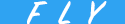
<style>
.page{position:relative;width:125px;height:24px;background:#2fa3f2}
.page>*{position:absolute;margin:0}
.t1{font:37px "SignPainter-HouseScriptSemibold";color:#ffffff}
</style>
<div class="page">
<p class="t1" style="left:27px;top:1px;width:21px;height:24px">F</p>
<p class="t1" style="left:58px;top:1px;width:13px;height:24px">L</p>
<p class="t1" style="left:88px;top:1px;width:19px;height:24px">Y</p>
</div>
